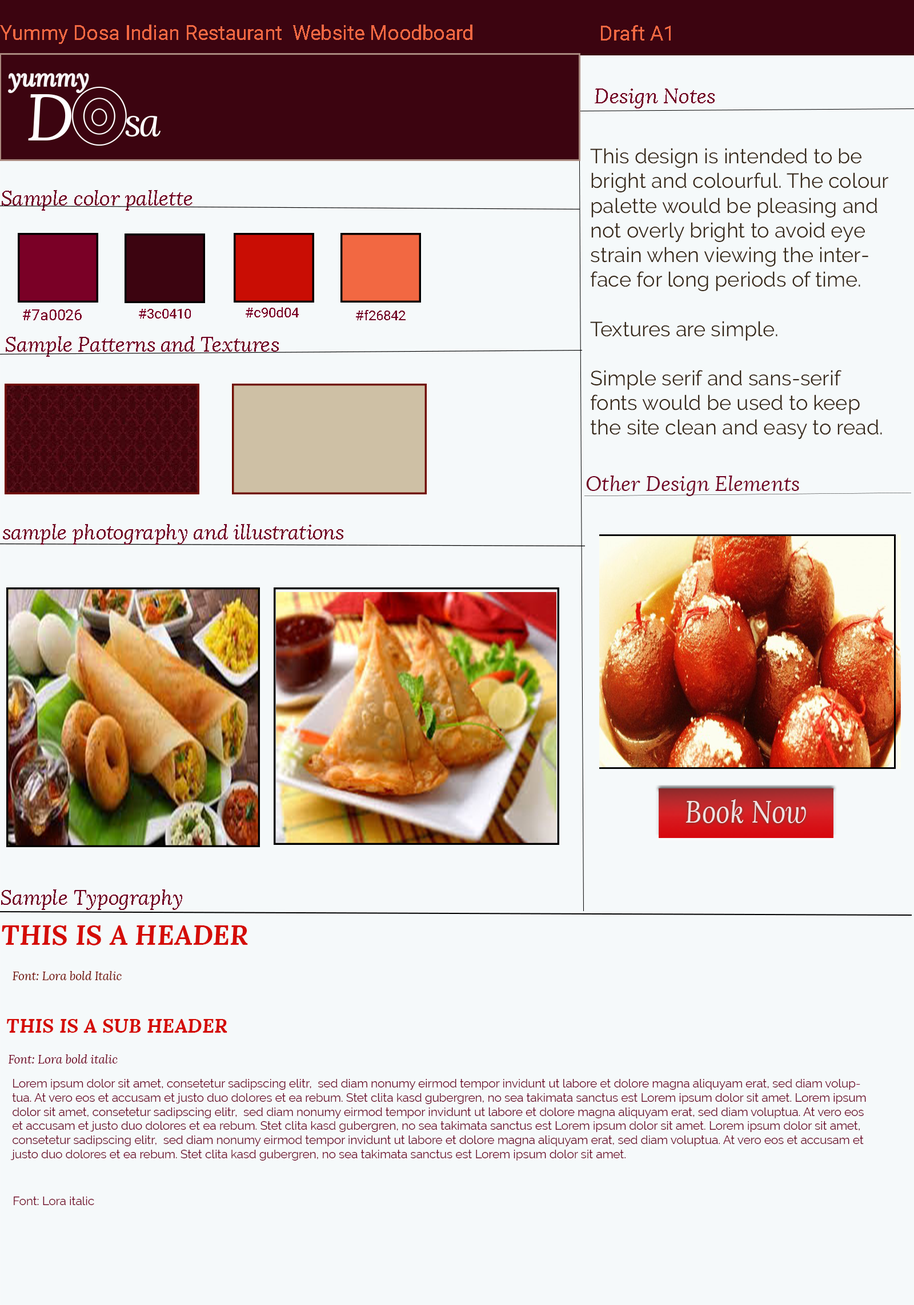
<style>
.page{position:relative;width:914px;height:1305px;background:#f5f9fa}
.page>*{position:absolute;margin:0}
.t1{font:20.6px "Roboto-Regular";color:#f26842}
.t2{font:20.6px "Lora-Italic";color:#730626}
.t3{font:20.6px "Raleway-Regular";color:#372819}
.t4{font:15.7px "Roboto-Regular";color:#7a0026}
.t5{font:13.7px "Roboto-Regular";color:#7a0026}
.t6{font:13.7px "Roboto-Regular";color:#730626}
.t7{font:31px "Lora-Italic";color:#f1e2e2;scale:0.87 1}
.t8{font:27.4px "Lora-BoldItalic";color:#d40c06}
.t9{font:11.7px "Lora-Italic";color:#710c02}
.t10{font:19.6px "Lora-BoldItalic";color:#d40c06}
.t11{font:11.7px "Lora-Italic";color:#730626}
.t12{font:11.7px "Raleway-Regular";color:#6c0224}
.t13{font:11.7px "Raleway-Regular";color:#730626}
</style>
<div class="page">
<p class="t1" style="left:0px;top:25px;width:472px;height:19px">Yummy Dosa Indian Restaurant  Website Moodboard</p>
<p class="t1" style="left:601px;top:25px;width:69px;height:16px">Draft A1</p>
<p class="t2" style="left:594px;top:89px;width:120px;height:19px">Design Notes</p>
<p class="t3" style="left:590px;top:148px;width:298px;height:291px">This design is intended to be bright and colourful. The colour palette would be pleasing and not overly bright to avoid eye strain when viewing the interface for long periods of time.<br><br>Textures are simple.<br><br>Simple serif and sans-serif fonts would be used to keep the site clean and easy to read.</p>
<p class="t2" style="left:2px;top:190px;width:190px;height:21px">Sample color pallette</p>
<p class="t4" style="left:23px;top:309px;width:59px;height:11px">#7a0026</p>
<p class="t5" style="left:139px;top:309px;width:52px;height:10px">#3c0410</p>
<p class="t5" style="left:246px;top:307px;width:53px;height:10px">#c90d04</p>
<p class="t6" style="left:356px;top:310px;width:49px;height:10px">#f26842</p>
<p class="t2" style="left:6px;top:336px;width:273px;height:21px">Sample Patterns and Textures</p>
<p class="t2" style="left:586px;top:476px;width:213px;height:20px">Other Design Elements</p>
<p class="t2" style="left:3px;top:524px;width:340px;height:21px">sample photography and illustrations</p>
<p class="t7" style="left:685px;top:799px;width:121px;height:24px">Book Now</p>
<p class="t2" style="left:1px;top:890px;width:181px;height:20px">Sample Typography</p>
<p class="t8" style="left:2px;top:926px;width:246px;height:20px">THIS IS A HEADER</p>
<p class="t9" style="left:13px;top:971px;width:109px;height:9px">Font: Lora bold Italic</p>
<p class="t10" style="left:7px;top:1019px;width:220px;height:14px">THIS IS A SUB HEADER</p>
<p class="t11" style="left:9px;top:1055px;width:109px;height:9px">Font: Lora bold italic</p>
<p class="t12" style="left:10px;top:1079px;width:856px;height:82px">Lorem ipsum dolor sit amet, consetetur sadipscing elitr,  sed diam nonumy eirmod tempor invidunt ut labore et dolore magna aliquyam erat, sed diam voluptua. At vero eos et accusam et justo duo dolores et ea rebum. Stet clita kasd gubergren, no sea takimata sanctus est Lorem ipsum dolor sit amet. Lorem ipsum dolor sit amet, consetetur sadipscing elitr,  sed diam nonumy eirmod tempor invidunt ut labore et dolore magna aliquyam erat, sed diam voluptua. At vero eos et accusam et justo duo dolores et ea rebum. Stet clita kasd gubergren, no sea takimata sanctus est Lorem ipsum dolor sit amet. Lorem ipsum dolor sit amet, consetetur sadipscing elitr,  sed diam nonumy eirmod tempor invidunt ut labore et dolore magna aliquyam erat, sed diam voluptua. At vero eos et accusam et justo duo dolores et ea rebum. Stet clita kasd gubergren, no sea takimata sanctus est Lorem ipsum dolor sit amet.</p>
<p class="t13" style="left:14px;top:1197px;width:80px;height:8px">Font: Lora italic</p>
</div>
